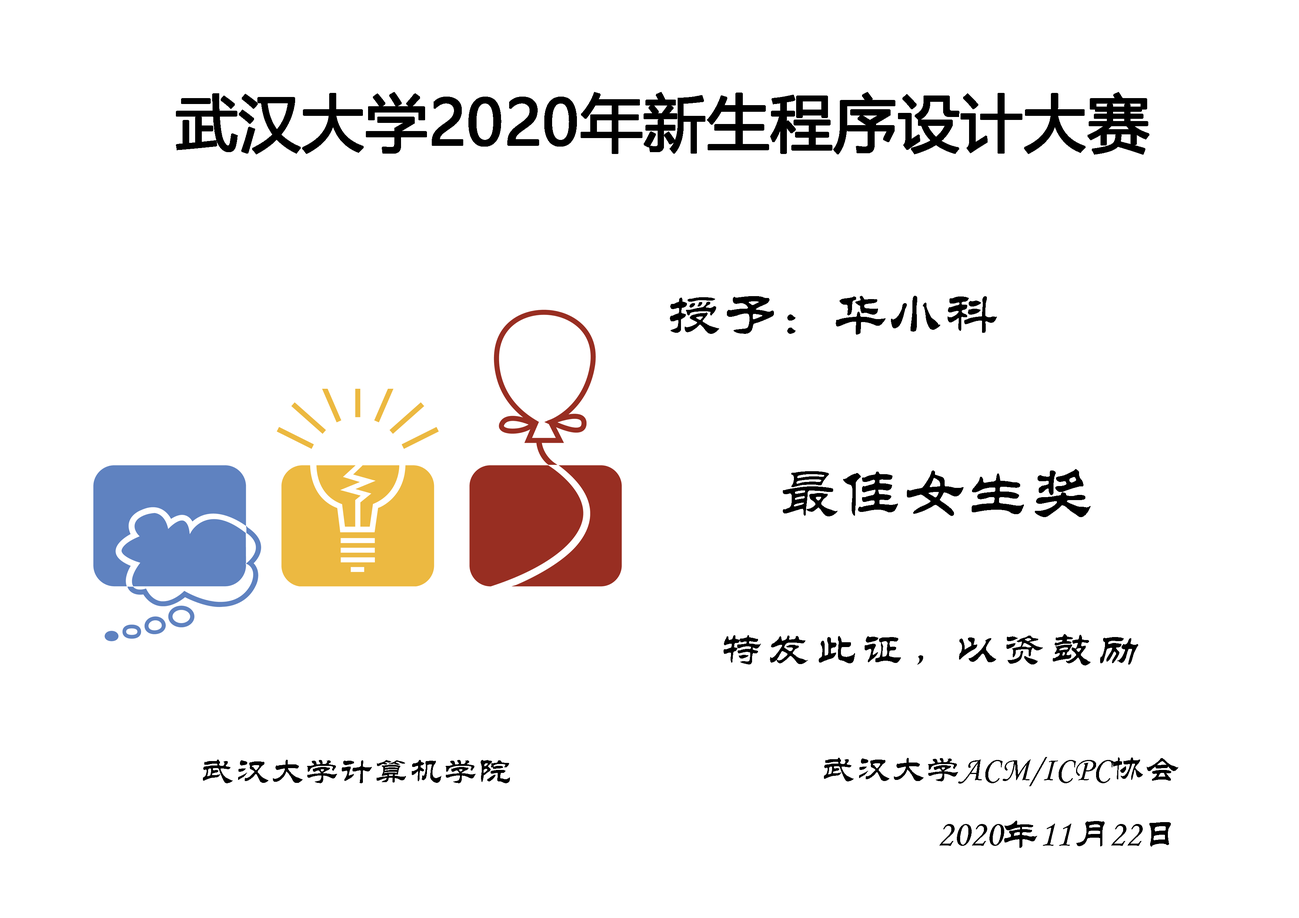
<style>
.page{position:relative;width:1299px;height:918px;background:#ffffff}
.page>*{position:absolute;margin:0}
.t1{font:61.7px "MicrosoftYaHei";color:#000000;font-weight:bold}
.t2{font:55.5px "STLiti";color:#000000}
.t3{font:62.7px "STLiti";color:#000000}
.t4{font:42.1px "STLiti";letter-spacing:0.12em;color:#000000}
.t5{font:33.9px "STLiti";letter-spacing:0.02em;color:#000000}
.t6{font:37px "STLiti";color:#000000}
</style>
<div class="page">
<p class="t1" style="left:176px;top:92px;width:973px;height:63px">武汉大学2020年新生程序设计大赛</p>
<p class="t2" style="left:670px;top:296px;width:327px;height:39px">授予：华小科</p>
<p class="t3" style="left:783px;top:469px;width:307px;height:48px">最佳女生奖</p>
<p class="t4" style="left:723px;top:634px;width:415px;height:32px">特发此证，以资鼓励</p>
<p class="t5" style="left:203px;top:760px;width:307px;height:23px">武汉大学计算机学院</p>
<p class="t5" style="left:824px;top:757px;width:354px;height:29px">武汉大学ACM/ICPC协会</p>
<p class="t6" style="left:939px;top:821px;width:232px;height:27px">2020年11月22日</p>
</div>
